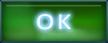
<style>
.page{position:relative;width:108px;height:43px}
.page>*{position:absolute;margin:0}
.t1{font:23px "Calibri";letter-spacing:0.1em;color:#ffffff;scale:1.2 1}
</style>
<div class="page">
<p class="t1" style="left:37px;top:14px;width:34px;height:16px">OK</p>
</div>
